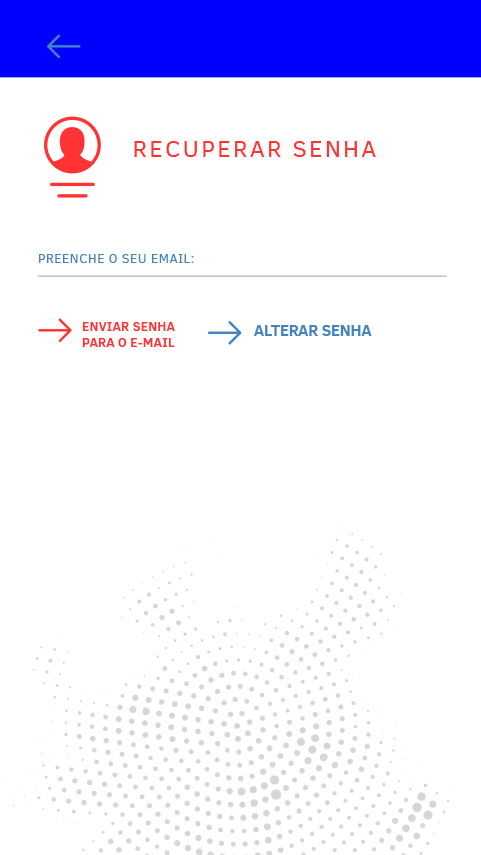
<style>
.page{position:relative;width:481px;height:855px;background:#ffffff}
.page>*{position:absolute;margin:0}
.t1{font:23.7px "ClearSans";letter-spacing:0.1em;color:#ff3333}
.t2{font:13.3px "ClearSans";letter-spacing:0.02em;color:#4284bd}
.t3{font:13.3px "ClearSans-Bold";color:#ff3333}
.t4{font:15.6px "ClearSans-Bold";color:#4284bd}
</style>
<div class="page">
<p class="t1" style="left:134px;top:141px;width:242px;height:16px">RECUPERAR SENHA</p>
<p class="t2" style="left:39px;top:254px;width:155px;height:9px">PREENCHE O SEU EMAIL:</p>
<p class="t3" style="left:82px;top:322px;width:93px;height:25px">ENVIAR SENHA<br>PARA O E-MAIL</p>
<p class="t4" style="left:254px;top:325px;width:118px;height:11px">ALTERAR SENHA</p>
</div>
